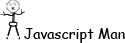
<style>
.page{position:relative;width:125px;height:43px;background:#ffffff}
.page>*{position:absolute;margin:0}
.t1{font:8.4px "Apple-Chancery"}
.t2{font:8.4px "Apple-Chancery";color:#020202;scale:2.21 1}
.t3{font:2.4px "Apple-Chancery"}
.t4{font:8.4px "Apple-Chancery";scale:2.21 1}
.t5{font:8.4px "Apple-Chancery";color:#020202}
.t6{font:17.5px "ComicSansMS";color:#020202;scale:0.85 1}
.t7{font:8.1px "ComicSansMS";color:#020202}
.t8{font:14px "ComicSansMS";color:#020202}
</style>
<div class="page">
<p class="t1" style="left:0px;top:11px;width:6px;height:5px;rotate:-140deg">&lt;</p>
<p class="t2" style="left:4px;top:14px;width:10px;height:2px">~</p>
<p class="t3" style="left:11px;top:7px;width:4px;height:3px;rotate:90deg">[#]</p>
<p class="t4" style="left:12px;top:13px;width:10px;height:2px">~</p>
<p class="t5" style="left:21px;top:9px;width:4px;height:6px;rotate:-59deg">&lt;</p>
<p class="t6" style="left:6px;top:25px;width:6px;height:15px;rotate:24deg">!</p>
<p class="t7" style="left:8px;top:21px;width:10px;height:7px;rotate:90deg">{}</p>
<p class="t6" style="left:15px;top:25px;width:5px;height:15px;rotate:156deg">!</p>
<p class="t8" style="left:24px;top:28px;width:101px;height:15px">Javascript Man</p>
</div>
